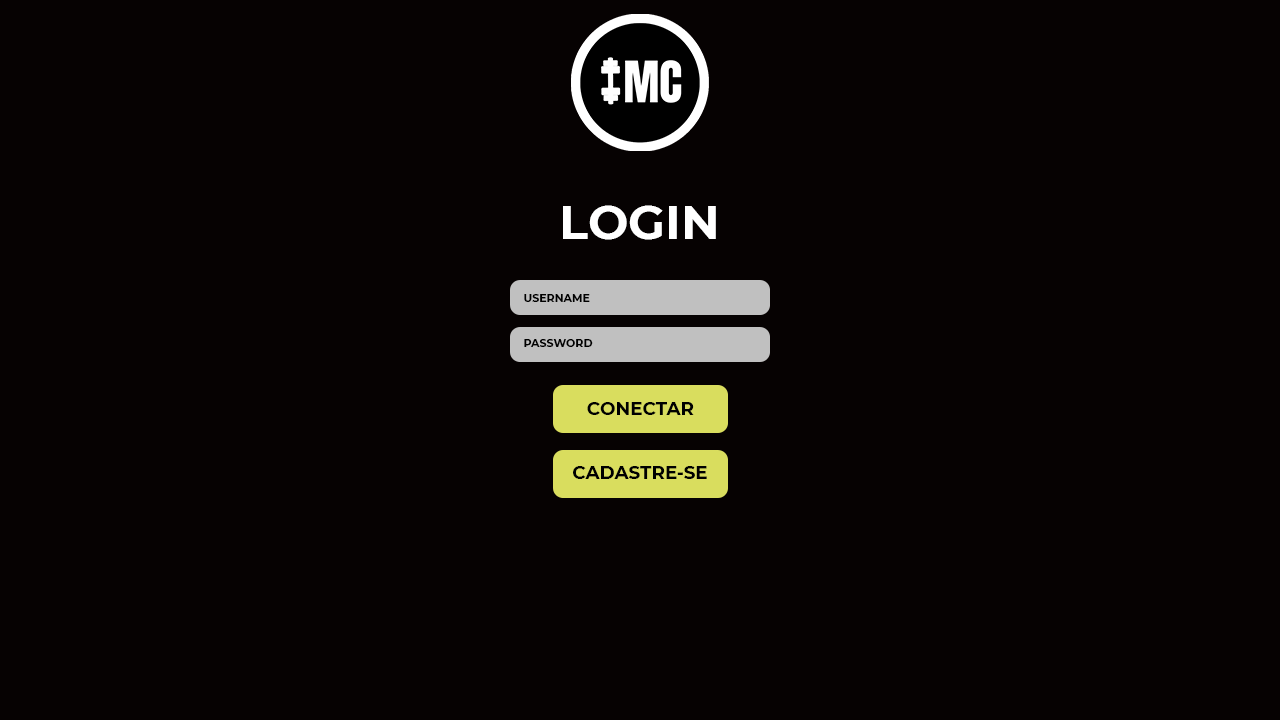
<style>
.page{position:relative;width:1280px;height:720px;background:#060202}
.page>*{position:absolute;margin:0}
.t1{font:48px "Montserrat-Bold";color:#ffffff}
.t2{font:11px "Montserrat-Bold";color:#000000}
.t3{font:18.3px "Montserrat-Bold";color:#000000}
</style>
<div class="page">
<p class="t1" style="left:563px;top:205px;width:153px;height:35px">LOGIN</p>
<p class="t2" style="left:524px;top:294px;width:66px;height:8px">USERNAME</p>
<p class="t2" style="left:524px;top:339px;width:69px;height:8px">PASSWORD</p>
<p class="t3" style="left:587px;top:402px;width:107px;height:13px">CONECTAR</p>
<p class="t3" style="left:573px;top:466px;width:134px;height:13px">CADASTRE-SE</p>
</div>
